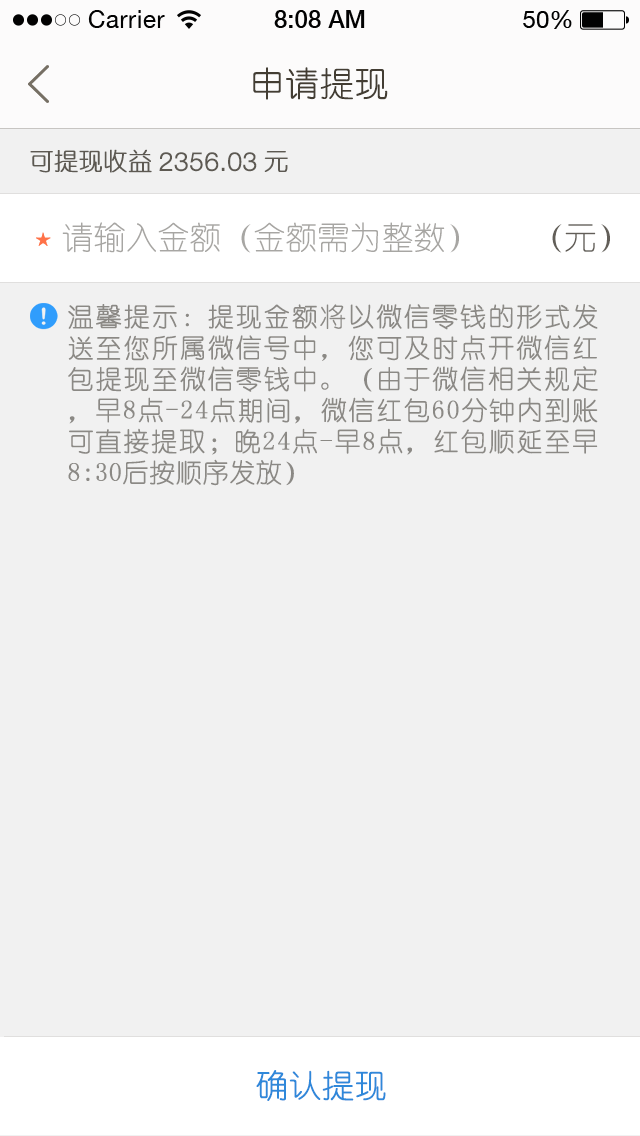
<style>
.page{position:relative;width:640px;height:1136px;background:#f1f1f1}
.page>*{position:absolute;margin:0}
.t1{font:34px "YouYuan";color:#433d33;text-transform:uppercase;font-weight:bold}
.t2{font:24px "YouYuan";color:#5d5952;text-transform:uppercase;font-weight:bold}
.t3{font:26px "HelveticaNeueLTPro-Lt";color:#5d5952;text-transform:uppercase;font-weight:bold}
.t4{font:32px "YouYuan";color:#a7a6a3;text-transform:uppercase}
.t5{font:32px "YouYuan";color:#625e58;text-transform:uppercase}
.t6{font:26px "YouYuan";color:#8b8985;text-transform:uppercase;font-weight:bold}
.t7{font:32px "YouYuan";color:#2f88da;text-transform:uppercase;font-weight:bold}
</style>
<div class="page">
<p class="t1" style="left:253px;top:67px;width:135px;height:33px">申请提现</p>
<p class="t2" style="left:30px;top:149px;width:122px;height:24px">可提现收益</p>
<p class="t3" style="left:159px;top:152px;width:98px;height:20px">2356.03</p>
<p class="t2" style="left:264px;top:151px;width:24px;height:21px">元</p>
<p class="t4" style="left:62px;top:222px;width:397px;height:31px">请输入金额（金额需为整数）</p>
<p class="t5" style="left:552px;top:224px;width:58px;height:29px">（元）</p>
<p class="t6" style="left:68px;top:304px;width:530px;height:182px;text-align:justify">温馨提示：提现金额将以微信零钱的形式发送至您所属微信号中，您可及时点开微信红包提现至微信零钱中。（由于微信相关规定，早8点-24点期间，微信红包60分钟内到账可直接提取；晚24点-早8点，红包顺延至早8:30后按顺序发放）</p>
<p class="t7" style="left:256px;top:1070px;width:130px;height:31px">确认提现</p>
</div>
